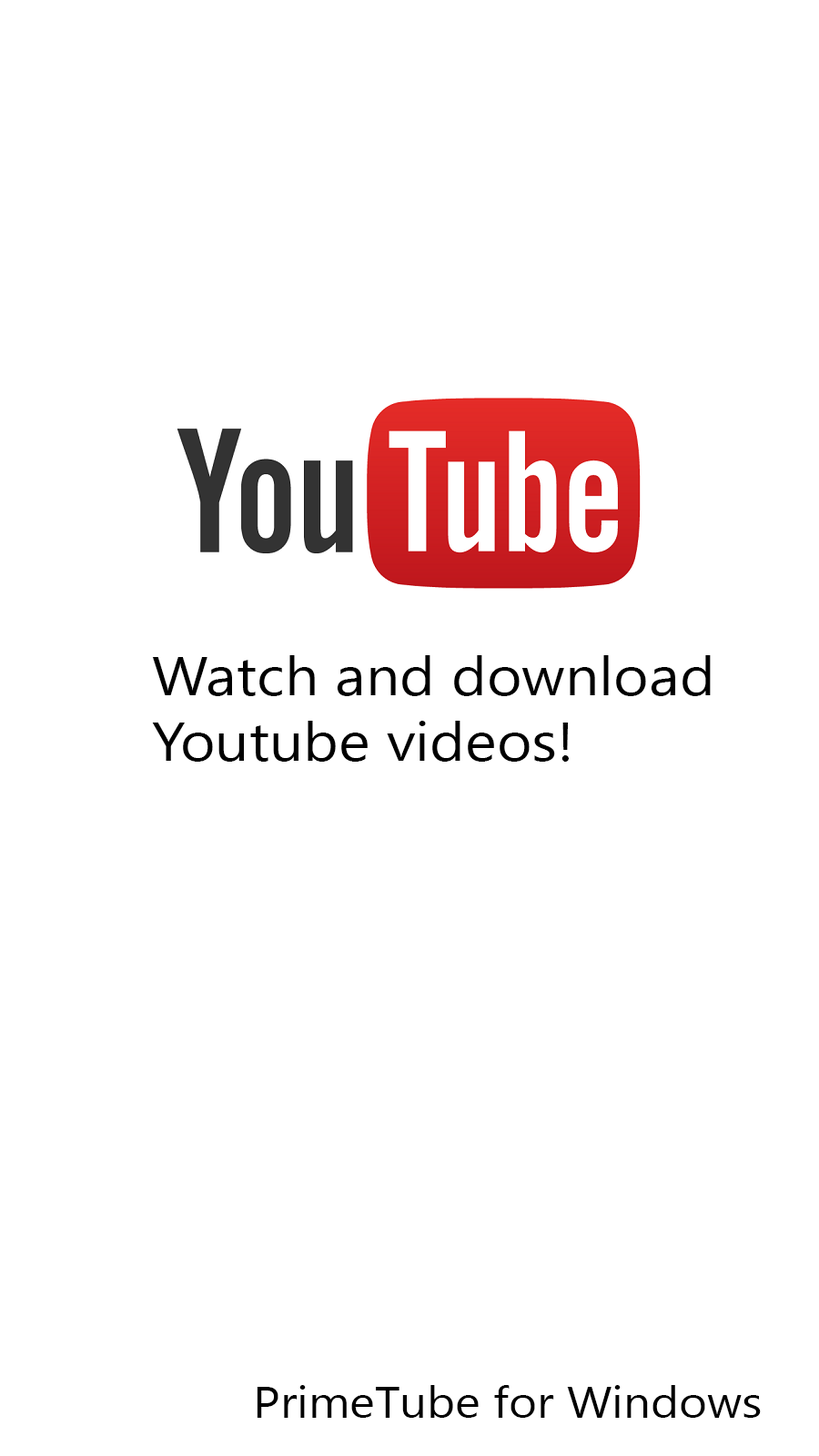
<style>
.page{position:relative;width:819px;height:1456px;background:#ffffff}
.page>*{position:absolute;margin:0}
.t1{font:54.6px "SegoeUI";color:#000000;scale:1.1 1}
.t2{font:43.7px "SegoeUI";color:#000000;scale:1.1 1}
</style>
<div class="page">
<p class="t1" style="left:152px;top:655px;width:559px;height:107px">Watch and download <br>Youtube videos!</p>
<p class="t2" style="left:257px;top:1385px;width:504px;height:33px">PrimeTube for Windows</p>
</div>
